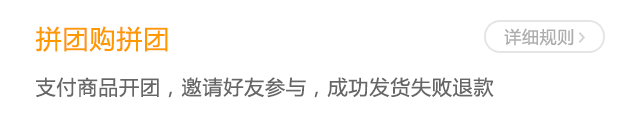
<style>
.page{position:relative;width:640px;height:125px;background:#ffffff}
.page>*{position:absolute;margin:0}
.t1{font:25.8px "MicrosoftYaHei";letter-spacing:0.04em;color:#ff9900}
.t2{font:17px "MicrosoftYaHei";letter-spacing:0.04em;color:#adadad}
.t3{font:20px "MicrosoftYaHei";letter-spacing:0.04em;color:#666666}
</style>
<div class="page">
<p class="t1" style="left:35px;top:26px;width:133px;height:26px">拼团购拼团</p>
<p class="t2" style="left:504px;top:28px;width:70px;height:18px">详细规则</p>
<p class="t3" style="left:36px;top:77px;width:458px;height:21px">支付商品开团，邀请好友参与，成功发货失败退款</p>
</div>
